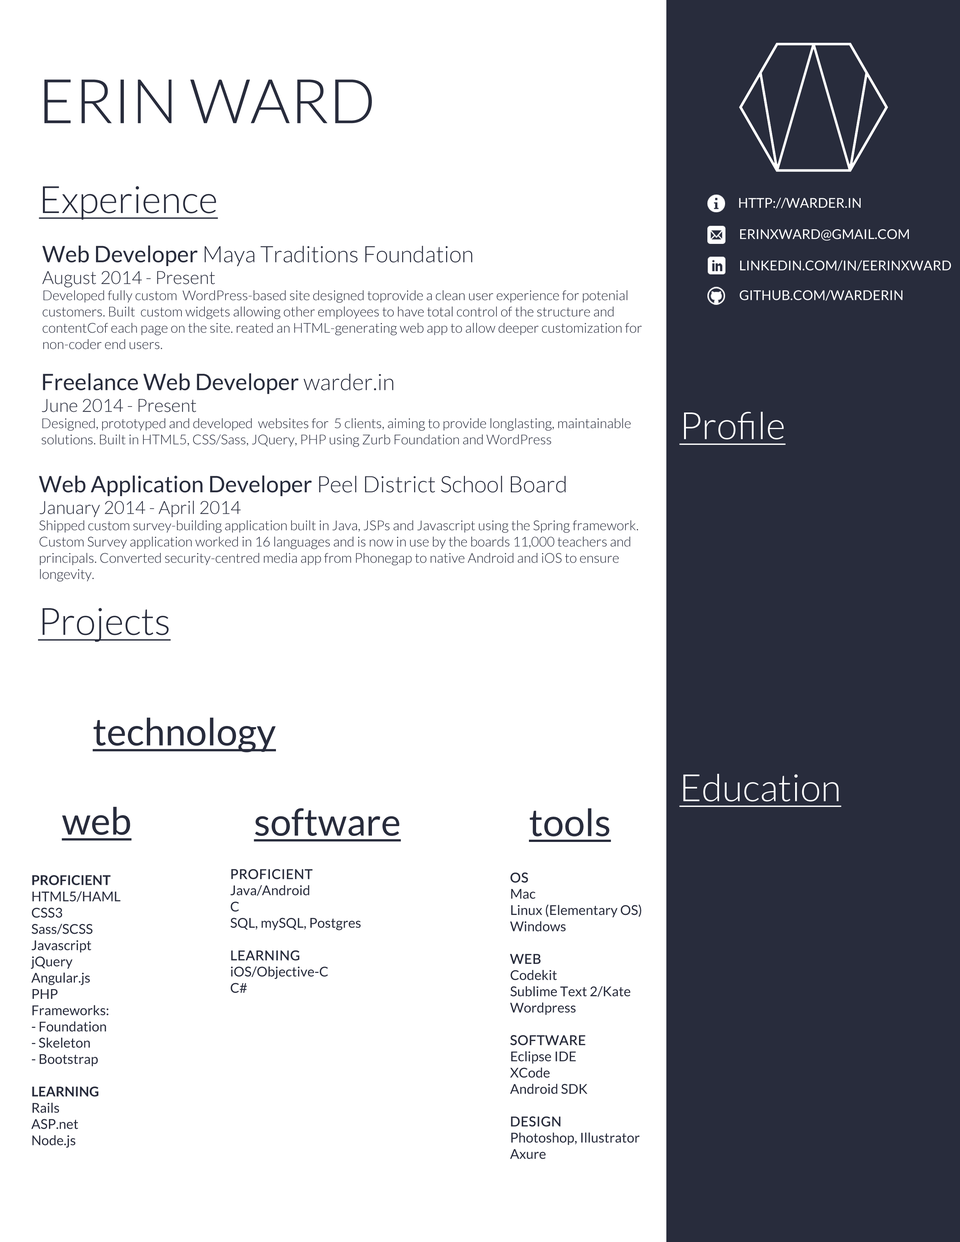
<style>
.page{position:relative;width:960px;height:1242px;background:#ffffff}
.page>*{position:absolute;margin:0}
.t1{font:61.4px "Lato-Light";color:#282c3c}
.t2{font:37.6px "Lato-Light";color:#282c3c;text-decoration:underline}
.t3{font:13.6px "Lato-Regular";color:#ffffff}
.t4{font:13.6px "Lato-Light";color:#282c3c}
.t5{font:22.6px "Lato-Regular";color:#282c3c}
.t6{font:22.6px "Lato-Light";color:#282c3c}
.t7{font:18.1px "Lato-Light";color:#282c3c}
.t8{font:37.6px "Lato-Light";color:#ffffff;text-decoration:underline}
.t9{font:22.6px/37.6px "Lato-Regular";color:#282c3c}
.t10{font:22.6px/37.6px "Lato-Light";color:#282c3c}
.t11{font:37.6px "Lato-Regular";color:#282c3c;text-decoration:underline}
.t12{font:13.6px "Lato-Regular";color:#282c3c}
.t13{font:13.6px "Lato-Regular";color:#282c3c;font-weight:bold}
.t14{font:13.6px "Lato-Bold";color:#282c3c}
</style>
<div class="page">
<p class="t1" style="left:44px;top:79px;width:328px;height:44px">ERIN WARD</p>
<p class="t2" style="left:39px;top:186px;width:179px;height:34px">Experience</p>
<p class="t3" style="left:739px;top:198px;width:122px;height:11px">HTTP://WARDER.IN</p>
<p class="t3" style="left:740px;top:229px;width:169px;height:12px">ERINXWARD@GMAIL.COM</p>
<p class="t4" style="left:42px;top:245px;width:600px;height:104px"><span class="t5">Web Developer </span><span class="t6">Maya Traditions Foundation<br></span><span class="t7">August 2014 - Present<br></span>Developed fully custom  WordPress-based site designed toprovide a clean user experience for potenial <br>customers. Built  custom widgets allowing other employees to have total control of the structure and <br>contentCof each page on the site. reated an HTML-generating web app to allow deeper customization for <br>non-coder end users.</p>
<p class="t3" style="left:740px;top:260px;width:211px;height:11px">LINKEDIN.COM/IN/EERINXWARD</p>
<p class="t3" style="left:739px;top:290px;width:163px;height:11px">GITHUB.COM/WARDERIN</p>
<p class="t4" style="left:41px;top:373px;width:590px;height:74px"><span class="t5">Freelance Web Developer</span><span class="t6"> warder.in<br></span><span class="t7">June 2014 - Present<br></span>Designed, prototyped and developed  websites for  5 clients, aiming to provide longlasting, maintainable<br>solutions. Built in HTML5, CSS/Sass, JQuery, PHP using Zurb Foundation and WordPress</p>
<p class="t8" style="left:679px;top:412px;width:107px;height:33px">Profile</p>
<p class="t4" style="left:39px;top:475px;width:599px;height:107px"><span class="t9">Web Application Developer</span><span class="t10"> Peel District School Board<br></span><span class="t7">January 2014 - April 2014<br></span>Shipped custom survey-building application built in Java, JSPs and Javascript using the Spring framework. <br>Custom Survey application worked in 16 languages and is now in use by the boards 11,000 teachers and<br>principals. Converted security-centred media app from Phonegap to native Android and iOS to ensure<br>longevity.</p>
<p class="t2" style="left:38px;top:608px;width:133px;height:34px">Projects</p>
<p class="t11" style="left:93px;top:717px;width:183px;height:35px">technology</p>
<p class="t8" style="left:679px;top:774px;width:162px;height:33px">Education</p>
<p class="t11" style="left:62px;top:807px;width:70px;height:34px">web</p>
<p class="t11" style="left:254px;top:808px;width:147px;height:34px">software</p>
<p class="t11" style="left:529px;top:808px;width:82px;height:34px">tools</p>
<p class="t12" style="left:230px;top:869px;width:131px;height:124px"><span class="t13">PROFICIENT<br></span>Java/Android<br>C<br>SQL, mySQL, Postgres<br><br><span class="t13">LEARNING<br></span>iOS/Objective-C<br>C#</p>
<p class="t12" style="left:31px;top:875px;width:89px;height:273px"><span class="t14">PROFICIENT <br></span>HTML5/HAML<br>CSS3<br>Sass/SCSS<br>Javascript<br>jQuery<br>Angular.js<br>PHP<br>Frameworks:<br>- Foundation<br>- Skeleton<br>- Bootstrap<br><br><span class="t14">LEARNING<br></span>Rails<br>ASP.net<br>Node.js</p>
<p class="t12" style="left:510px;top:873px;width:131px;height:286px"><span class="t13">OS<br></span>Mac<br>Linux (Elementary OS)<br>Windows<br><br><span class="t13">WEB<br></span>Codekit<br>Sublime Text 2/Kate<br>Wordpress<br><br><span class="t13">SOFTWARE<br></span>Eclipse IDE<br>XCode<br>Android SDK<br><br><span class="t13">DESIGN<br></span>Photoshop, Illustrator<br>Axure</p>
</div>
